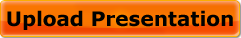
<style>
.page{position:relative;width:241px;height:38px}
.page>*{position:absolute;margin:0}
.t1{font:20px "Verdana-Bold";color:#000000}
</style>
<div class="page">
<p class="t1" style="left:7px;top:10px;width:226px;height:20px">Upload Presentation</p>
</div>
